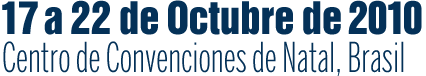
<style>
.page{position:relative;width:426px;height:76px;background:#ffffff}
.page>*{position:absolute;margin:0}
.t1{font:41px "Swiss921BT-RegularA";color:#043158}
.t2{font:41px "BentonSansExtraComp-Light";color:#043158}
</style>
<div class="page">
<p class="t1" style="left:2px;top:0px;width:420px;height:35px">17 a 22 de Octubre de 2010</p>
<p class="t2" style="left:3px;top:41px;width:401px;height:35px">Centro de Convenciones de Natal, Brasil</p>
</div>
